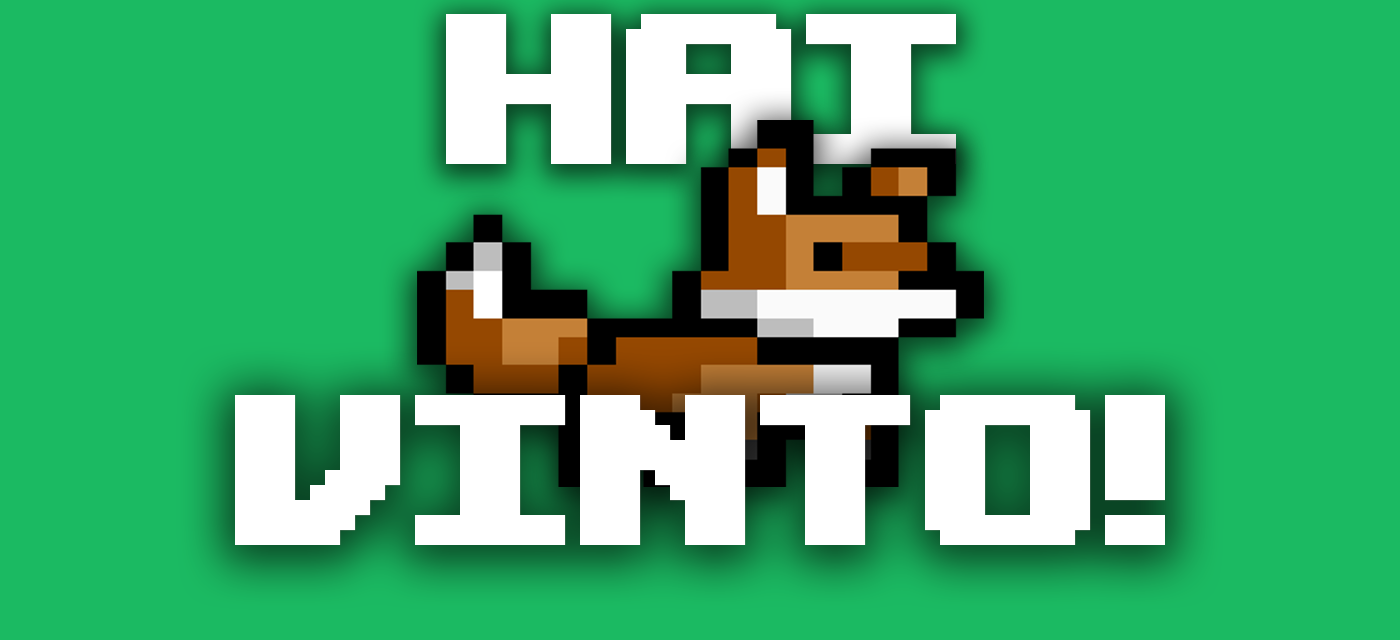
<style>
.page{position:relative;width:1400px;height:640px;background:#1bba62}
.page>*{position:absolute;margin:0}
.t1{font:300px "UpheavalTT-BRK-";color:#ffffff}
</style>
<div class="page">
<p class="t1" style="left:446px;top:14px;width:510px;height:150px">HAI</p>
<p class="t1" style="left:235px;top:395px;width:930px;height:150px">VINTO!</p>
</div>
